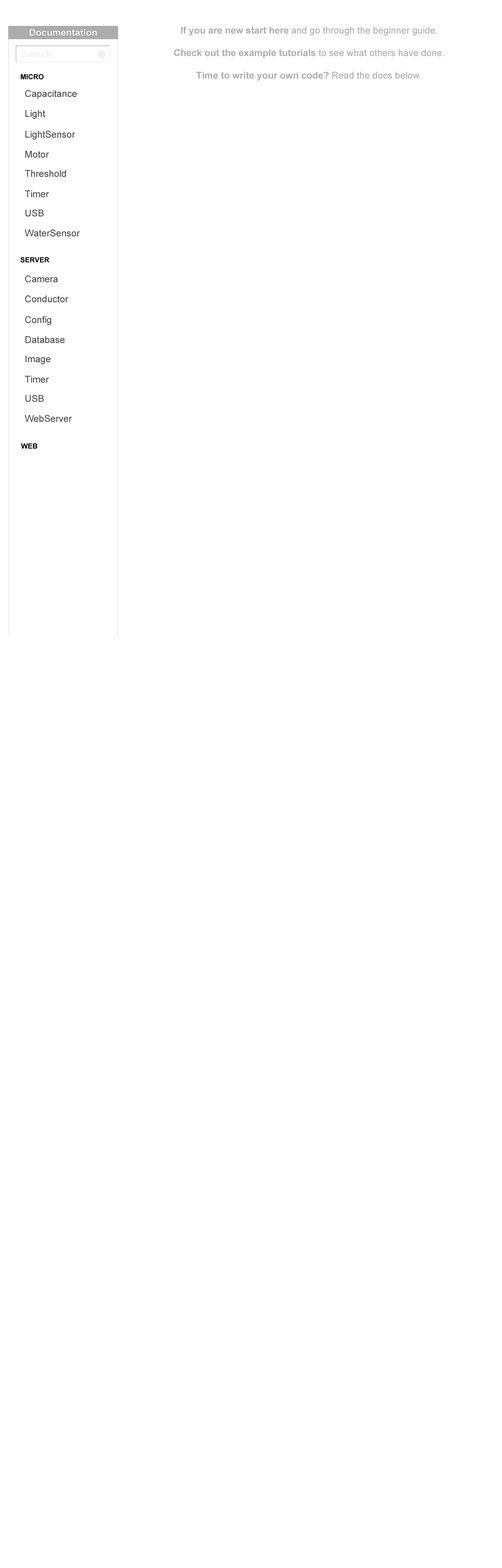
<style>
.page{position:relative;width:502px;height:1568px;background:#ffffff}
.page>*{position:absolute;margin:0}
.t1{font:9.4px "Arial-BoldMT";color:#ffffff}
.t2{font:9.4px "ArialMT";color:#acacac}
.t3{font:9.4px "Arial-BoldMT";color:#acacac}
.t4{font:9.4px "Arial-BoldMT";color:#f2f2f2}
.t5{font:7.1px "Arial-BoldMT";color:#000000}
.t6{font:9.4px "ArialMT";color:#474747}
</style>
<div class="page">
<p class="t1" style="left:29px;top:29px;width:68px;height:7px">Documentation</p>
<p class="t2" style="left:174px;top:27px;width:270px;height:54px;text-align:center"><span class="t3">If you are new start here </span>and go through the beginner guide.<br><span class="t3"><br>Check out the example tutorials</span> to see what others have done.<br><span class="t3"><br>Time to write your own code?</span> Read the docs below.</p>
<p class="t4" style="left:21px;top:51px;width:31px;height:7px">Search</p>
<p class="t5" style="left:21px;top:74px;width:23px;height:6px">MICRO</p>
<p class="t6" style="left:25px;top:90px;width:52px;height:9px">Capacitance</p>
<p class="t6" style="left:25px;top:110px;width:20px;height:9px">Light</p>
<p class="t6" style="left:25px;top:131px;width:50px;height:9px">LightSensor</p>
<p class="t6" style="left:25px;top:151px;width:24px;height:7px">Motor</p>
<p class="t6" style="left:25px;top:170px;width:41px;height:7px">Threshold</p>
<p class="t6" style="left:25px;top:190px;width:24px;height:8px">Timer</p>
<p class="t6" style="left:25px;top:209px;width:19px;height:8px">USB</p>
<p class="t6" style="left:25px;top:229px;width:55px;height:8px">WaterSensor</p>
<p class="t5" style="left:20px;top:257px;width:29px;height:6px">SERVER</p>
<p class="t6" style="left:25px;top:275px;width:33px;height:8px">Camera</p>
<p class="t6" style="left:25px;top:295px;width:43px;height:8px">Conductor</p>
<p class="t6" style="left:25px;top:316px;width:26px;height:9px">Config</p>
<p class="t6" style="left:25px;top:336px;width:40px;height:7px">Database</p>
<p class="t6" style="left:25px;top:355px;width:26px;height:9px">Image</p>
<p class="t6" style="left:25px;top:376px;width:24px;height:7px">Timer</p>
<p class="t6" style="left:25px;top:395px;width:19px;height:7px">USB</p>
<p class="t6" style="left:25px;top:415px;width:47px;height:7px">WebServer</p>
<p class="t5" style="left:21px;top:443px;width:16px;height:6px">WEB</p>
</div>
